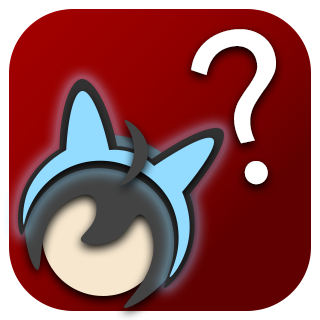
<style>
.page{position:relative;width:320px;height:320px}
.page>*{position:absolute;margin:0}
.t1{font:200px "HarmonyOS_Sans_SC";letter-spacing:-0.02em;color:#ffffff}
</style>
<div class="page">
<p class="t1" style="left:191px;top:29px;width:85px;height:156px;rotate:-12deg">?</p>
</div>
